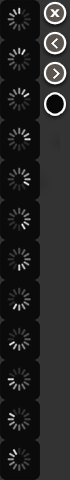
<style>
.page{position:relative;width:70px;height:480px;background:#0b0b0b}
.page>*{position:absolute;margin:0}
.t1{font:14px "DroidSans-Bold";letter-spacing:0.01em;color:#ffffff;scale:1.29 1}
</style>
<div class="page">
<p class="t1" style="left:50px;top:9px;width:10px;height:8px">x</p>
</div>
